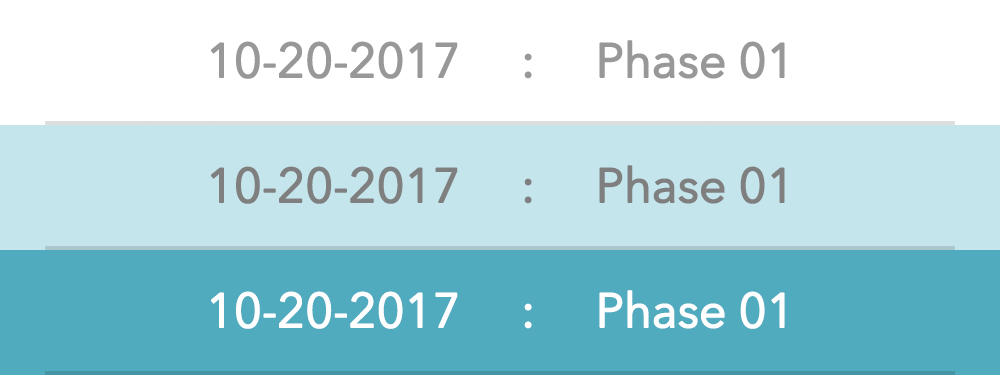
<style>
.page{position:relative;width:1000px;height:375px;background:#ffffff}
.page>*{position:absolute;margin:0}
.t1{font:48px "AvenirNextLTPro-Regular";letter-spacing:-0.025em;color:#7f7f7f;font-weight:bold}
.t2{font:48px "AvenirNextLTPro-Regular";letter-spacing:-0.025em;color:#ffffff;font-weight:bold}
</style>
<div class="page">
<p class="t1" style="left:211px;top:165px;width:574px;height:39px">10-20-2017     :     Phase 01</p>
<p class="t2" style="left:211px;top:290px;width:574px;height:39px">10-20-2017     :     Phase 01</p>
</div>
